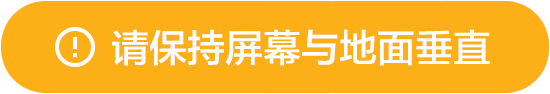
<style>
.page{position:relative;width:550px;height:94px;background:#fdaf17}
.page>*{position:absolute;margin:0}
.t1{font:38px "FZLTZHK--GBK1-0";color:#ffffff}
</style>
<div class="page">
<p class="t1" style="left:112px;top:29px;width:378px;height:37px">请保持屏幕与地面垂直</p>
</div>
